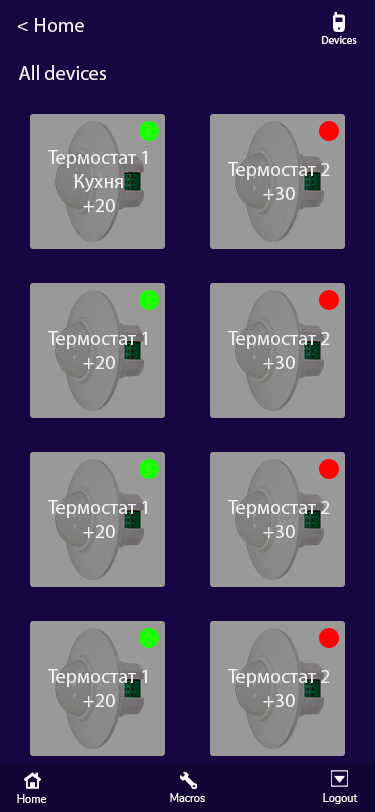
<style>
.page{position:relative;width:375px;height:812px;background:#160642}
.page>*{position:absolute;margin:0}
.t1{font:20px "MyriadPro-Regular";color:#f3f3f3}
.t2{font:20px "Nunito-Regular";color:#f3f3f3}
.t3{font:11px "MyriadPro-Regular";color:#f3f3f3}
.t4{font:11px "Nunito-Regular";color:#ffffff}
</style>
<div class="page">
<p class="t1" style="left:17px;top:18px;width:67px;height:14px"><span class="t2">&lt; </span>Home</p>
<p class="t3" style="left:322px;top:36px;width:35px;height:8px">Devices</p>
<p class="t1" style="left:19px;top:65px;width:87px;height:15px">All devices</p>
<p class="t1" style="left:48px;top:150px;width:99px;height:62px;text-align:center">Термостат 1<br>Кухня<br>+20</p>
<p class="t1" style="left:228px;top:162px;width:102px;height:38px;text-align:center">Термостат 2<br>+30</p>
<p class="t1" style="left:48px;top:331px;width:99px;height:38px;text-align:center">Термостат 1<br>+20</p>
<p class="t1" style="left:228px;top:331px;width:102px;height:38px;text-align:center">Термостат 2<br>+30</p>
<p class="t1" style="left:48px;top:500px;width:99px;height:38px;text-align:center">Термостат 1<br>+20</p>
<p class="t1" style="left:228px;top:500px;width:102px;height:38px;text-align:center">Термостат 2<br>+30</p>
<p class="t1" style="left:48px;top:669px;width:99px;height:38px;text-align:center">Термостат 1<br>+20</p>
<p class="t1" style="left:228px;top:669px;width:102px;height:38px;text-align:center">Термостат 2<br>+30</p>
<p class="t4" style="left:17px;top:794px;width:29px;height:9px">Home</p>
<p class="t4" style="left:170px;top:793px;width:35px;height:9px">Macros</p>
<p class="t4" style="left:323px;top:793px;width:35px;height:11px">Logout</p>
</div>
